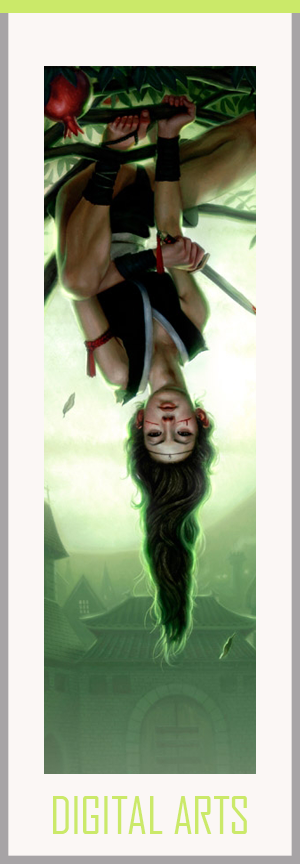
<style>
.page{position:relative;width:300px;height:864px;background:#fbf7f5}
.page>*{position:absolute;margin:0}
.t1{font:50px "AgencyFB-Reg";letter-spacing:-0.01em;color:#cbe969;text-transform:uppercase}
</style>
<div class="page">
<p class="t1" style="left:53px;top:796px;width:194px;height:38px">digital arts</p>
</div>
